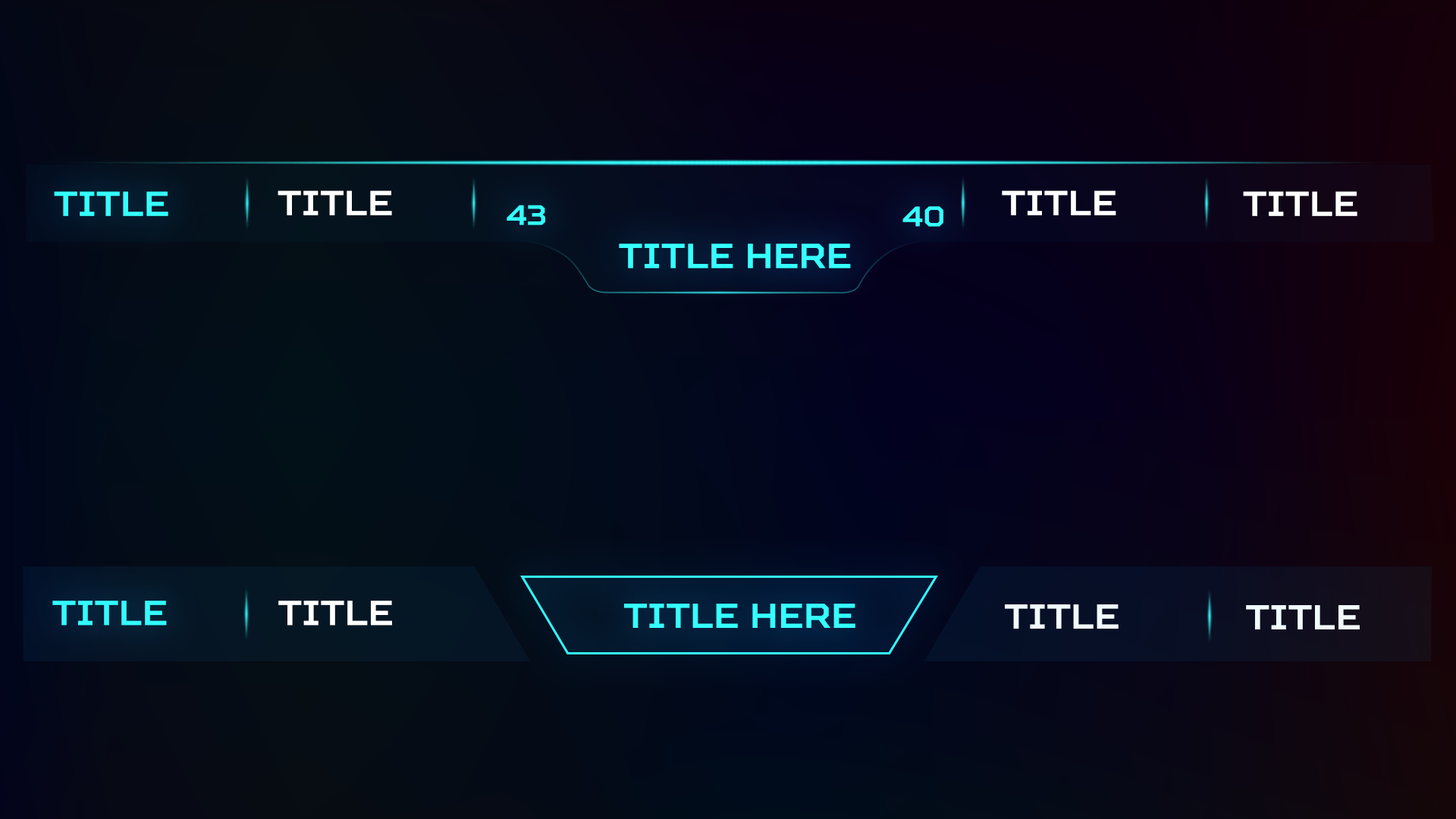
<style>
.page{position:relative;width:1456px;height:819px}
.page>*{position:absolute;margin:0}
.t1{font:34.6px "SquaresBold";color:#35ffff;text-transform:uppercase}
.t2{font:34.6px "SquaresBold";color:#ffffff;text-transform:uppercase}
.t3{font:28px "SquaresBold";color:#35ffff;text-transform:uppercase}
.t4{font:34.6px "SquaresBold";color:#33faff;text-transform:uppercase}
.t5{font:34.6px "SquaresBold";color:#f1faff;text-transform:uppercase}
</style>
<div class="page">
<p class="t1" style="left:54px;top:191px;width:114px;height:25px">title</p>
<p class="t2" style="left:278px;top:190px;width:114px;height:25px">title</p>
<p class="t2" style="left:1002px;top:190px;width:114px;height:25px">title</p>
<p class="t2" style="left:1243px;top:191px;width:114px;height:25px">title</p>
<p class="t3" style="left:507px;top:205px;width:38px;height:20px">43</p>
<p class="t3" style="left:902px;top:206px;width:41px;height:21px">40</p>
<p class="t1" style="left:619px;top:243px;width:232px;height:25px">Title here</p>
<p class="t4" style="left:52px;top:601px;width:115px;height:25px">title</p>
<p class="t2" style="left:278px;top:601px;width:114px;height:25px">title</p>
<p class="t1" style="left:624px;top:604px;width:231px;height:24px">Title here</p>
<p class="t5" style="left:1005px;top:604px;width:114px;height:25px">title</p>
<p class="t5" style="left:1246px;top:605px;width:114px;height:24px">title</p>
</div>
